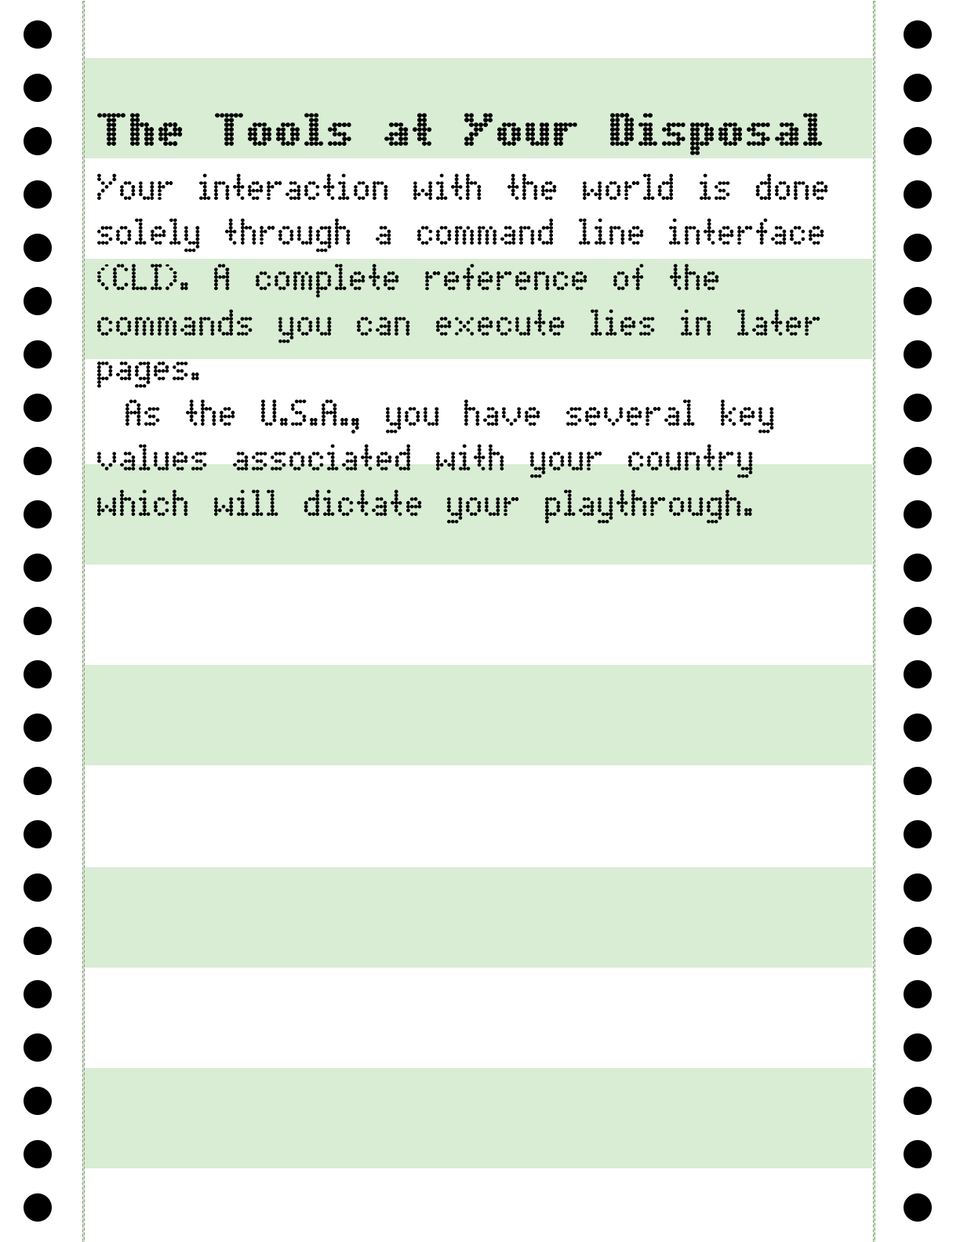
<style>
.page{position:relative;width:960px;height:1242px;background:#ffffff}
.page>*{position:absolute;margin:0}
.t1{font:47.1px "DotMatrixBold";color:#000000}
.t2{font:37.6px "DotMatrix";color:#000000}
</style>
<div class="page">
<p class="t1" style="left:97px;top:113px;width:726px;height:42px">The Tools at Your Disposal</p>
<p class="t2" style="left:97px;top:173px;width:731px;height:351px">Your interaction with the world is done<br>solely through a command line interface<br>(CLI). A complete reference of the <br>commands you can execute lies in later <br>pages.<br> As the U.S.A., you have several key<br>values associated with your country<br>which will dictate your playthrough.</p>
</div>
